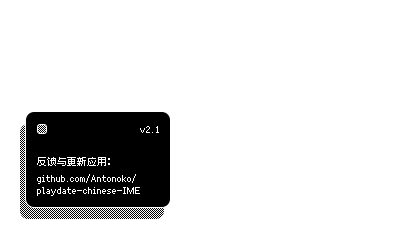
<style>
.page{position:relative;width:400px;height:240px;background:#ffffff}
.page>*{position:absolute;margin:0}
.t1{font:10px "Fusion-Pixel-10px-Proportional-zh_hans-Regular";color:#ffffff}
.t2{font:10px/12px "Fusion-Pixel-10px-Proportional-zh_hans-Regular";color:#ffffff}
</style>
<div class="page">
<p class="t1" style="left:140px;top:126px;width:19px;height:7px">v2.1</p>
<p class="t2" style="left:37px;top:157px;width:103px;height:39px"><span class="t1">反馈与更新应用：<br></span>github.com/Antonoko/<br>playdate-chinese-IME</p>
</div>
